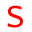
<style>
.page{position:relative;width:32px;height:32px;background:#ffffff}
.page>*{position:absolute;margin:0}
.t1{font:33.3px "LucidaConsole";color:#ff0000}
</style>
<div class="page">
<p class="t1" style="left:7px;top:5px;width:16px;height:23px">S</p>
</div>
